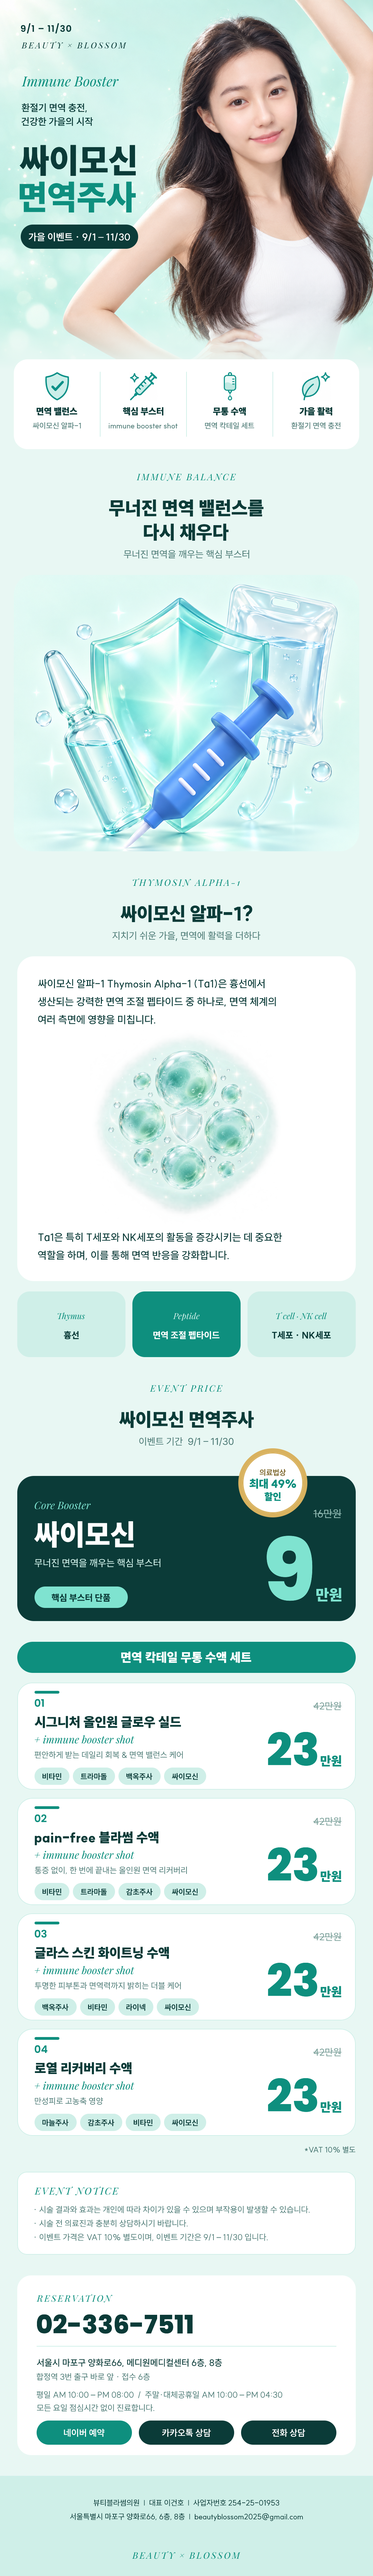
<style>
.page{position:relative;width:373px;height:2576px;background:#ffffff}
.page>*{position:absolute;margin:0}
.t1{font:9px "Poppins-SemiBold";letter-spacing:0.06em;color:#0b3b38}
.t2{font:8.3px "PlayfairDisplay-Italic";letter-spacing:0.2em;color:#0b3b38}
.t3{font:13.8px "PlayfairDisplay-Italic";color:#0e8f7e}
.t4{font:9.7px "SUIT-SemiBold";color:#0b3b38}
.t5{font:33.9px "SUIT-Heavy";color:#0b3b38}
.t6{font:33.9px "SUIT-Heavy";color:#0e8f7e}
.t7{font:9.7px "SUIT-Bold";color:#ffffff}
.t8{font:9px "SUIT-Heavy";color:#0b3b38}
.t9{font:7.6px "SUIT-Medium";color:#4f7c77}
.t10{font:9px "PlayfairDisplay-Italic";letter-spacing:0.16em;color:#0e8f7e}
.t11{font:18.7px "SUIT-Heavy";color:#0b3b38}
.t12{font:9.7px "Pretendard-Regular";color:#4f7c77}
.t13{font:10.4px "SUIT-Medium";color:#0b3b38}
.t14{font:8.3px "PlayfairDisplay-Italic";color:#0e8f7e}
.t15{font:8.3px "PlayfairDisplay-Italic";color:#cfefe8}
.t16{font:9px "SUIT-ExtraBold";color:#0b3b38}
.t17{font:9px "SUIT-ExtraBold";color:#ffffff}
.t18{font:7.6px "SUIT-Bold";color:#7a6428}
.t19{font:11.1px "SUIT-Heavy";color:#0e8f7e}
.t20{font:9.7px "SUIT-Heavy";color:#0e8f7e}
.t21{font:10.4px "PlayfairDisplay-Italic";color:#7fe3d0}
.t22{font:10.4px "SUIT-Medium";color:#8fb8b1}
.t23{font:29px "SUIT-Heavy";color:#ffffff}
.t24{font:86.4px "Poppins-ExtraBold";color:#7fe3d0}
.t25{font:9.7px "SUIT-Medium";color:#cfefe8}
.t26{font:15.2px "SUIT-Heavy";color:#7fe3d0}
.t27{font:12.4px "SUIT-Heavy";color:#ffffff}
.t28{font:10.4px "Poppins-SemiBold";color:#0e8f7e}
.t29{font:9.7px "SUIT-Medium";color:#7fa39d}
.t30{font:13.1px "SUIT-Heavy";color:#0b3b38}
.t31{font:44.9px "Poppins-ExtraBold";color:#0e8f7e}
.t32{font:10.4px "PlayfairDisplay-Italic";color:#0e8f7e}
.t33{font:8.3px "SUIT-Regular";color:#4f7c77}
.t34{font:12.4px "SUIT-Heavy";color:#0e8f7e}
.t35{font:7.6px "SUIT-Bold";color:#0b3b38}
.t36{font:9.7px "PlayfairDisplay-Italic";letter-spacing:0.12em;color:#0e8f7e}
.t37{font:25.6px "Poppins-ExtraBold";color:#0b3b38}
.t38{font:9px "SUIT-Medium";color:#0b3b38}
.t39{font:9px "SUIT-Bold";color:#ffffff}
.t40{font:7.6px "SUIT-Regular";color:#0b3b38}
</style>
<div class="page">
<p class="t1" style="left:21px;top:23px;width:50px;height:11px">9/1 – 11/30</p>
<p class="t2" style="left:21px;top:41px;width:105px;height:8px">BEAUTY × BLOSSOM</p>
<p class="t3" style="left:21px;top:76px;width:98px;height:11px">Immune Booster</p>
<p class="t4" style="left:21px;top:103px;width:66px;height:10px">환절기 면역 충전,</p>
<p class="t4" style="left:21px;top:117px;width:72px;height:9px">건강한 가을의 시작</p>
<p class="t5" style="left:20px;top:145px;width:116px;height:31px">싸이모신</p>
<p class="t6" style="left:19px;top:181px;width:117px;height:32px">면역주사</p>
<p class="t7" style="left:29px;top:233px;width:101px;height:9px">가을 이벤트 · 9/1 – 11/30</p>
<p class="t8" style="left:37px;top:407px;width:40px;height:9px">면역 밸런스</p>
<p class="t8" style="left:123px;top:407px;width:41px;height:9px">핵심 부스터</p>
<p class="t8" style="left:213px;top:407px;width:33px;height:9px">무통 수액</p>
<p class="t8" style="left:300px;top:407px;width:32px;height:9px">가을 활력</p>
<p class="t9" style="left:33px;top:422px;width:48px;height:7px">싸이모신 알파-1</p>
<p class="t9" style="left:109px;top:423px;width:69px;height:6px">immune booster shot</p>
<p class="t9" style="left:205px;top:422px;width:49px;height:7px">면역 칵테일 세트</p>
<p class="t9" style="left:291px;top:422px;width:50px;height:7px">환절기 면역 충전</p>
<p class="t10" style="left:136px;top:473px;width:100px;height:8px">IMMUNE BALANCE</p>
<p class="t11" style="left:109px;top:499px;width:155px;height:18px">무너진 면역 밸런스를</p>
<p class="t11" style="left:144px;top:523px;width:85px;height:18px">다시 채우다</p>
<p class="t12" style="left:124px;top:550px;width:125px;height:9px">무너진 면역을 깨우는 핵심 부스터</p>
<p class="t10" style="left:133px;top:878px;width:107px;height:9px">THYMOSIN ALPHA-1</p>
<p class="t11" style="left:121px;top:905px;width:132px;height:17px">싸이모신 알파-1?</p>
<p class="t12" style="left:112px;top:931px;width:149px;height:10px">지치기 쉬운 가을, 면역에 활력을 더하다</p>
<p class="t13" style="left:38px;top:979px;width:227px;height:11px">싸이모신 알파-1 Thymosin Alpha-1 (Tα1)은 흉선에서</p>
<p class="t13" style="left:38px;top:997px;width:238px;height:10px">생산되는 강력한 면역 조절 펩타이드 중 하나로, 면역 체계의</p>
<p class="t13" style="left:38px;top:1015px;width:117px;height:9px">여러 측면에 영향을 미칩니다.</p>
<p class="t13" style="left:38px;top:1232px;width:244px;height:10px">Tα1은 특히 T세포와 NK세포의 활동을 증강시키는 데 중요한</p>
<p class="t13" style="left:38px;top:1250px;width:191px;height:10px">역할을 하며, 이를 통해 면역 반응을 강화합니다.</p>
<p class="t14" style="left:58px;top:1313px;width:27px;height:8px">Thymus</p>
<p class="t15" style="left:173px;top:1313px;width:27px;height:8px">Peptide</p>
<p class="t14" style="left:276px;top:1312px;width:51px;height:8px">T cell · NK cell</p>
<p class="t16" style="left:64px;top:1331px;width:15px;height:8px">흉선</p>
<p class="t17" style="left:153px;top:1331px;width:67px;height:8px">면역 조절 펩타이드</p>
<p class="t16" style="left:272px;top:1331px;width:59px;height:8px">T세포 · NK세포</p>
<p class="t10" style="left:150px;top:1384px;width:72px;height:8px">EVENT PRICE</p>
<p class="t11" style="left:119px;top:1411px;width:135px;height:17px">싸이모신 면역주사</p>
<p class="t12" style="left:139px;top:1437px;width:95px;height:9px">이벤트 기간  9/1 – 11/30</p>
<p class="t18" style="left:260px;top:1469px;width:26px;height:7px">의료법상</p>
<p class="t19" style="left:249px;top:1478px;width:47px;height:11px">최대 49%</p>
<p class="t20" style="left:265px;top:1492px;width:16px;height:9px">할인</p>
<p class="t21" style="left:35px;top:1502px;width:56px;height:7px">Core Booster</p>
<p class="t22" style="left:313px;top:1509px;width:29px;height:9px">16만원</p>
<p class="t23" style="left:34px;top:1521px;width:100px;height:27px">싸이모신</p>
<p class="t24" style="left:267px;top:1536px;width:46px;height:65px">9</p>
<p class="t25" style="left:35px;top:1559px;width:126px;height:9px">무너진 면역을 깨우는 핵심 부스터</p>
<p class="t26" style="left:316px;top:1588px;width:26px;height:14px">만원</p>
<p class="t16" style="left:51px;top:1593px;width:60px;height:9px">핵심 부스터 단품</p>
<p class="t27" style="left:121px;top:1651px;width:131px;height:12px">면역 칵테일 무통 수액 세트</p>
<p class="t28" style="left:35px;top:1699px;width:9px;height:8px">01</p>
<p class="t29" style="left:313px;top:1702px;width:29px;height:8px">42만원</p>
<p class="t30" style="left:35px;top:1716px;width:146px;height:12px">시그니처 올인원 글로우 실드</p>
<p class="t31" style="left:268px;top:1732px;width:50px;height:34px">23</p>
<p class="t32" style="left:35px;top:1735px;width:99px;height:9px">+ immune booster shot</p>
<p class="t33" style="left:35px;top:1751px;width:148px;height:8px">편안하게 받는 데일리 회복 &amp; 면역 밸런스 케어</p>
<p class="t34" style="left:321px;top:1755px;width:20px;height:12px">만원</p>
<p class="t35" style="left:42px;top:1773px;width:19px;height:7px">비타민</p>
<p class="t35" style="left:80px;top:1773px;width:27px;height:7px">트라마돌</p>
<p class="t35" style="left:126px;top:1773px;width:27px;height:7px">백옥주사</p>
<p class="t35" style="left:172px;top:1773px;width:26px;height:7px">싸이모신</p>
<p class="t28" style="left:35px;top:1814px;width:12px;height:8px">02</p>
<p class="t29" style="left:313px;top:1817px;width:29px;height:9px">42만원</p>
<p class="t30" style="left:35px;top:1831px;width:124px;height:14px">pain-free 블라썸 수액</p>
<p class="t32" style="left:35px;top:1850px;width:99px;height:9px">+ immune booster shot</p>
<p class="t31" style="left:268px;top:1847px;width:50px;height:34px">23</p>
<p class="t33" style="left:35px;top:1866px;width:152px;height:8px">통증 없이, 한 번에 끝내는 올인원 면역 리커버리</p>
<p class="t34" style="left:321px;top:1871px;width:20px;height:11px">만원</p>
<p class="t35" style="left:42px;top:1888px;width:19px;height:7px">비타민</p>
<p class="t35" style="left:80px;top:1888px;width:27px;height:7px">트라마돌</p>
<p class="t35" style="left:126px;top:1888px;width:27px;height:7px">감초주사</p>
<p class="t35" style="left:172px;top:1888px;width:26px;height:7px">싸이모신</p>
<p class="t28" style="left:35px;top:1930px;width:12px;height:8px">03</p>
<p class="t29" style="left:313px;top:1932px;width:29px;height:9px">42만원</p>
<p class="t30" style="left:35px;top:1947px;width:134px;height:12px">글라스 스킨 화이트닝 수액</p>
<p class="t32" style="left:35px;top:1966px;width:99px;height:8px">+ immune booster shot</p>
<p class="t31" style="left:268px;top:1962px;width:50px;height:35px">23</p>
<p class="t33" style="left:35px;top:1982px;width:146px;height:7px">투명한 피부톤과 면역력까지 밝히는 더블 케어</p>
<p class="t34" style="left:321px;top:1986px;width:20px;height:11px">만원</p>
<p class="t35" style="left:42px;top:2004px;width:27px;height:7px">백옥주사</p>
<p class="t35" style="left:88px;top:2004px;width:19px;height:7px">비타민</p>
<p class="t35" style="left:126px;top:2004px;width:19px;height:7px">라이넥</p>
<p class="t35" style="left:165px;top:2004px;width:26px;height:7px">싸이모신</p>
<p class="t28" style="left:35px;top:2045px;width:13px;height:8px">04</p>
<p class="t29" style="left:313px;top:2048px;width:29px;height:8px">42만원</p>
<p class="t30" style="left:35px;top:2062px;width:97px;height:12px">로열 리커버리 수액</p>
<p class="t32" style="left:35px;top:2081px;width:99px;height:9px">+ immune booster shot</p>
<p class="t31" style="left:268px;top:2078px;width:50px;height:34px">23</p>
<p class="t33" style="left:35px;top:2097px;width:68px;height:8px">만성피로 고농축 영양</p>
<p class="t34" style="left:321px;top:2101px;width:20px;height:12px">만원</p>
<p class="t35" style="left:42px;top:2119px;width:27px;height:7px">마늘주사</p>
<p class="t35" style="left:88px;top:2119px;width:26px;height:7px">감초주사</p>
<p class="t35" style="left:134px;top:2119px;width:19px;height:7px">비타민</p>
<p class="t35" style="left:172px;top:2119px;width:26px;height:7px">싸이모신</p>
<p class="t9" style="left:305px;top:2146px;width:51px;height:7px">*VAT 10% 별도</p>
<p class="t36" style="left:35px;top:2187px;width:84px;height:8px">EVENT NOTICE</p>
<p class="t33" style="left:35px;top:2206px;width:275px;height:7px">· 시술 결과와 효과는 개인에 따라 차이가 있을 수 있으며 부작용이 발생할 수 있습니다.</p>
<p class="t33" style="left:35px;top:2219px;width:153px;height:8px">· 시술 전 의료진과 충분히 상담하시기 바랍니다.</p>
<p class="t33" style="left:35px;top:2233px;width:233px;height:8px">· 이벤트 가격은 VAT 10% 별도이며, 이벤트 기간은 9/1 – 11/30 입니다.</p>
<p class="t10" style="left:37px;top:2294px;width:75px;height:8px">RESERVATION</p>
<p class="t37" style="left:37px;top:2314px;width:156px;height:20px">02-336-7511</p>
<p class="t38" style="left:37px;top:2359px;width:185px;height:8px">서울시 마포구 양화로66, 메디원메디컬센터 6층, 8층</p>
<p class="t33" style="left:37px;top:2373px;width:113px;height:7px">합정역 3번 출구 바로 앞 · 접수 6층</p>
<p class="t33" style="left:37px;top:2391px;width:246px;height:7px">평일 AM 10:00 – PM 08:00  /  주말·대체공휴일 AM 10:00 – PM 04:30</p>
<p class="t33" style="left:37px;top:2404px;width:117px;height:8px">모든 요일 점심시간 없이 진료합니다.</p>
<p class="t39" style="left:64px;top:2429px;width:41px;height:8px">네이버 예약</p>
<p class="t39" style="left:162px;top:2429px;width:49px;height:8px">카카오톡 상담</p>
<p class="t39" style="left:272px;top:2429px;width:33px;height:8px">전화 상담</p>
<p class="t40" style="left:93px;top:2499px;width:187px;height:7px">뷰티블라썸의원  |  대표 이건호  |  사업자번호 254-25-01953</p>
<p class="t40" style="left:70px;top:2513px;width:233px;height:8px">서울특별시 마포구 양화로66, 6층, 8층  |  beautyblossom2025@gmail.com</p>
<p class="t10" style="left:132px;top:2551px;width:108px;height:8px">BEAUTY × BLOSSOM</p>
</div>
